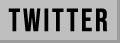
<style>
.page{position:relative;width:120px;height:43px;background:#bfbfbf}
.page>*{position:absolute;margin:0}
.t1{font:32px "BebasNeue-Regular";letter-spacing:0.08em;color:#000000}
</style>
<div class="page">
<p class="t1" style="left:8px;top:8px;width:100px;height:24px">TWITTER</p>
</div>
